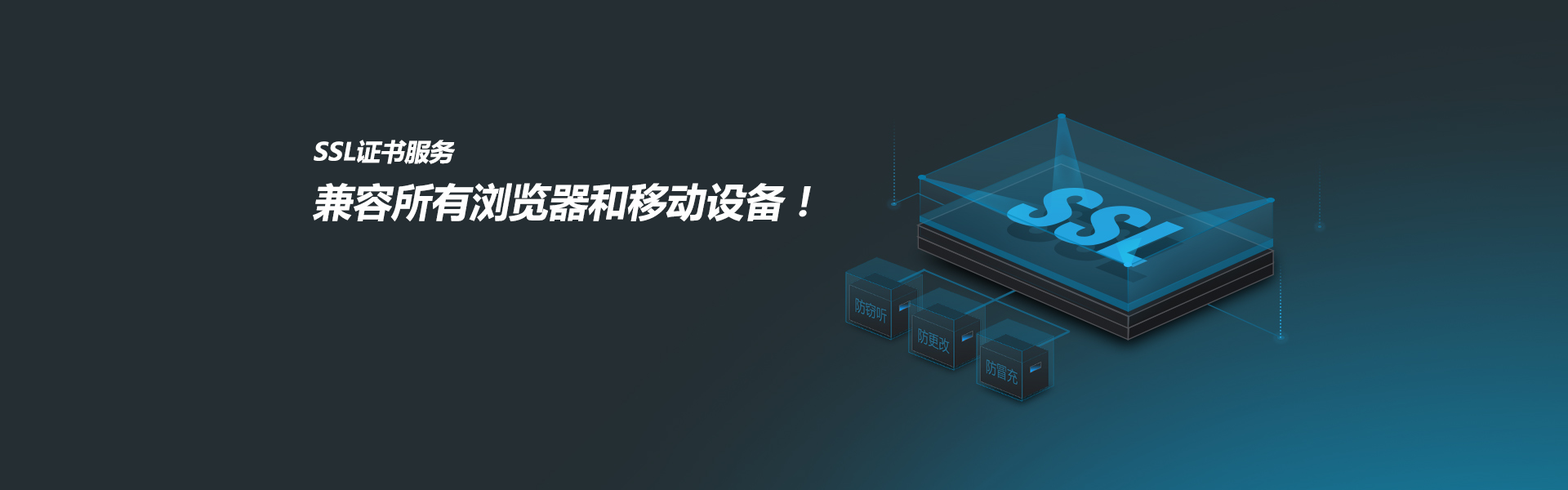
<style>
.page{position:relative;width:1568px;height:490px;background:#252e33}
.page>*{position:absolute;margin:0}
.t1{font:39.2px "MicrosoftYaHei-Bold";color:#fefefe;font-style:italic}
.t2{font:24.5px "MicrosoftYaHei-Bold";color:#fefefe;font-style:italic}
</style>
<div class="page">
<p class="t1" style="left:313px;top:140px;width:498px;height:82px"><span class="t2">SSL证书服务<br></span>兼容所有浏览器和移动设备！</p>
</div>
